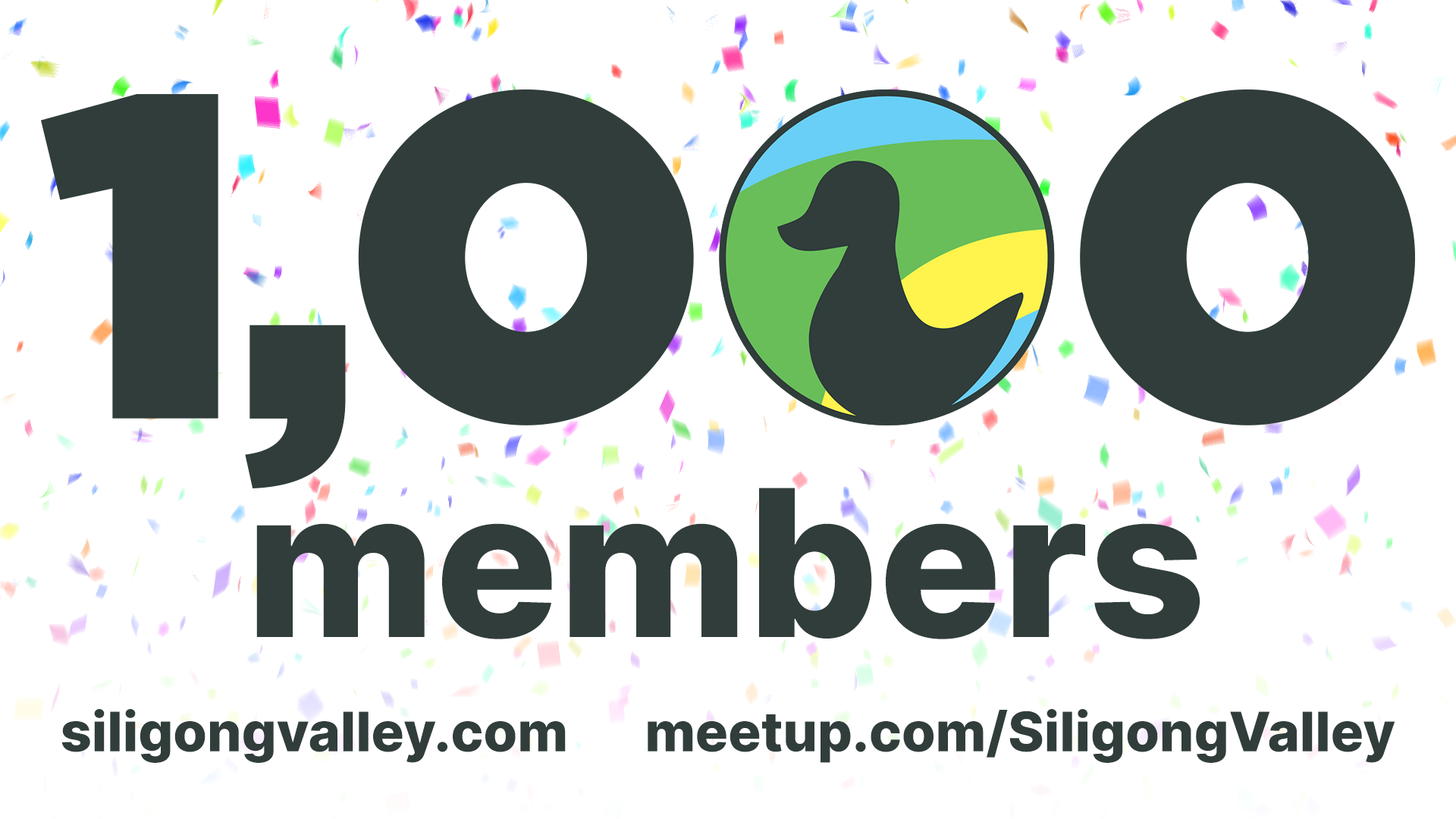
<style>
.page{position:relative;width:1456px;height:819px;background:#ffffff}
.page>*{position:absolute;margin:0}
.t1{font:204.5px "Inter-ExtraBold";color:#303d3b}
.t2{font:54.6px "Inter-ExtraBold";color:#303d3b}
</style>
<div class="page">
<p class="t1" style="left:256px;top:488px;width:944px;height:151px">members</p>
<p class="t2" style="left:61px;top:709px;width:505px;height:54px">siligongvalley.com</p>
<p class="t2" style="left:648px;top:709px;width:747px;height:54px">meetup.com/SiligongValley</p>
</div>
